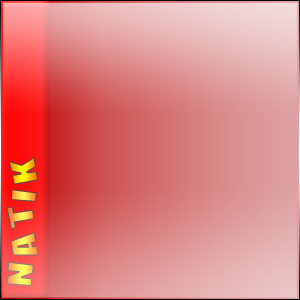
<style>
.page{position:relative;width:300px;height:300px}
.page>*{position:absolute;margin:0}
.t1{font:30px "Happy-HappyJoyJoy";letter-spacing:0.2em}
</style>
<div class="page">
<p class="t1" style="left:7px;top:158px;width:31px;height:127px;rotate:-90deg">NATIK</p>
</div>
